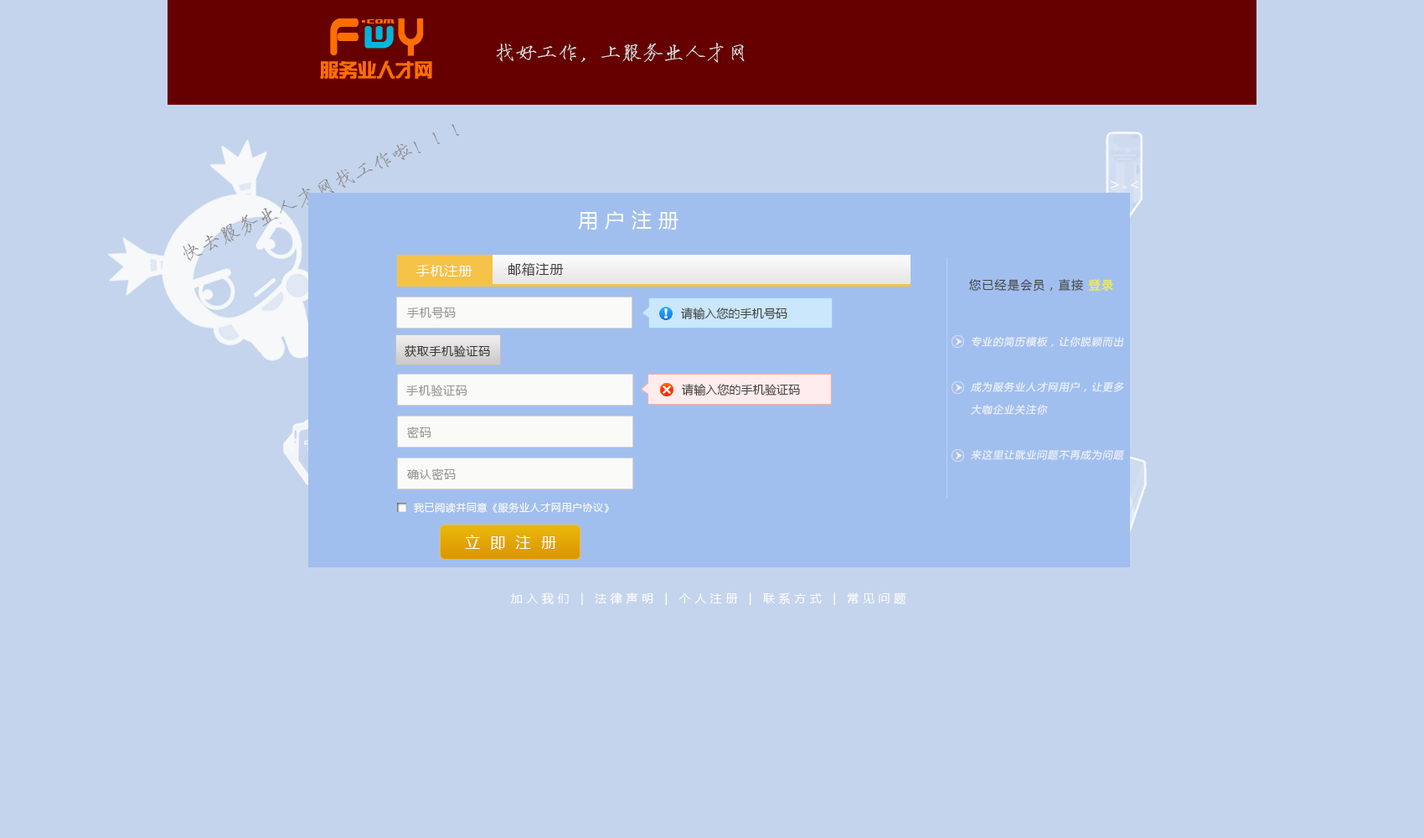
<style>
.page{position:relative;width:1424px;height:838px;background:#c4d4ed}
.page>*{position:absolute;margin:0}
.t1{font:46.2px "QuantumRound(BRK)";letter-spacing:0.01em;color:#ff6e01;font-weight:bold;scale:0.74 1}
.t2{font:8.4px "Underwhelmed(BRK)";letter-spacing:0.01em;color:#ff6d01}
.t3{font:10.5px "VarianceBRK";letter-spacing:0.01em;color:#ff6e01}
.t4{font:36.5px "roundabout";letter-spacing:0.01em;color:#ff6e01;font-weight:bold;scale:0.91 1}
.t5{font:20.9px "HYi3gj";letter-spacing:0.01em;color:#e5ebeb}
.t6{font:18.4px "SingyiEG-Ultra-GB";letter-spacing:0.01em;color:#ff6e01}
.t7{font:20.9px "HYi3gj";letter-spacing:0.01em;color:#8c8787}
.t8{font:20.1px "MicrosoftYaHei";letter-spacing:0.33em;color:#fbfbfa}
.t9{font:13.4px "MicrosoftYaHei";letter-spacing:0.05em;color:#fbfbfa}
.t10{font:13.4px "MicrosoftYaHei";letter-spacing:0.05em;color:#3b3b3b}
.t11{font:11.7px "MicrosoftYaHei";letter-spacing:0.09em;color:#474746}
.t12{font:11.7px "MicrosoftYaHei";letter-spacing:0.09em;color:#4f5051}
.t13{font:11.7px "MicrosoftYaHei";letter-spacing:0.09em;color:#f9ef36}
.t14{font:11.7px "MicrosoftYaHei";letter-spacing:0.05em;color:#959593}
.t15{font:11.7px "MicrosoftYaHei";letter-spacing:0.01em;color:#444441}
.t16{font:10.1px/22.6px "MicrosoftYaHei";letter-spacing:0.09em;color:#eff3f8;font-style:italic}
.t17{font:11.7px "MicrosoftYaHei";letter-spacing:0.05em;color:#363634}
.t18{font:10.1px "MicrosoftYaHei";letter-spacing:0.05em;color:#f8f8f6}
.t19{font:15.1px "MicrosoftYaHei";letter-spacing:0.69em;color:#fbfbf8}
.t20{font:11.7px "MicrosoftYaHei";letter-spacing:0.33em;color:#fbfbfa}
</style>
<div class="page">
<p class="t1" style="left:330px;top:18px;width:28px;height:37px">f</p>
<p class="t2" style="left:362px;top:20px;width:3px;height:3px">.</p>
<p class="t3" style="left:367px;top:19px;width:27px;height:4px">com</p>
<p class="t4" style="left:398px;top:18px;width:26px;height:38px">y</p>
<p class="t5" style="left:496px;top:43px;width:249px;height:20px">找好工作，上服务业人才网</p>
<p class="t6" style="left:320px;top:60px;width:112px;height:19px">服务业人才网</p>
<p class="t7" style="left:183px;top:124px;width:276px;height:136px;rotate:-25deg">快去服务业人才网找工作啦！！！</p>
<p class="t8" style="left:578px;top:210px;width:100px;height:19px">用户注册</p>
<p class="t9" style="left:416px;top:265px;width:56px;height:11px">手机注册</p>
<p class="t10" style="left:508px;top:262px;width:56px;height:14px">邮箱注册</p>
<p class="t11" style="left:969px;top:279px;width:144px;height:12px">您已经是会员，<span class="t12">直接 </span><span class="t13">登录</span></p>
<p class="t14" style="left:407px;top:307px;width:49px;height:11px">手机号码</p>
<p class="t15" style="left:681px;top:307px;width:106px;height:13px">请输入您的手机号码</p>
<p class="t16" style="left:970px;top:336px;width:155px;height:124px">专业的简历模板，让你脱颖而出<br><br>成为服务业人才网用户，让更多<br>大咖企业关注你<br><br>来这里让就业问题不再成为问题</p>
<p class="t17" style="left:405px;top:345px;width:85px;height:12px">获取手机验证码</p>
<p class="t14" style="left:406px;top:384px;width:61px;height:12px">手机验证码</p>
<p class="t15" style="left:682px;top:384px;width:118px;height:12px">请输入您的手机验证码</p>
<p class="t14" style="left:407px;top:426px;width:24px;height:12px">密码</p>
<p class="t14" style="left:407px;top:468px;width:49px;height:12px">确认密码</p>
<p class="t18" style="left:414px;top:502px;width:195px;height:11px">我已阅读并同意《服务业人才网用户协议》</p>
<p class="t19" style="left:465px;top:534px;width:91px;height:15px">立即注册</p>
<p class="t20" style="left:510px;top:592px;width:395px;height:13px">加入我们 | 法律声明 | 个人注册 | 联系方式 | 常见问题</p>
</div>
